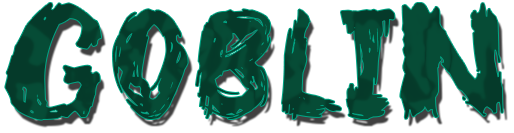
<style>
.page{position:relative;width:514px;height:133px;background:#ffffff}
.page>*{position:absolute;margin:0}
.t1{font:130.6px "Dark-World";letter-spacing:0.04em;color:#064732;scale:1.05 1}
.t2{font:166.2px "PainShop";letter-spacing:0.04em;color:#064732;scale:1.05 1}
</style>
<div class="page">
<p class="t1" style="left:5px;top:3px;width:498px;height:117px"><span class="t2">G</span>OBLI<span class="t2">N</span></p>
</div>
